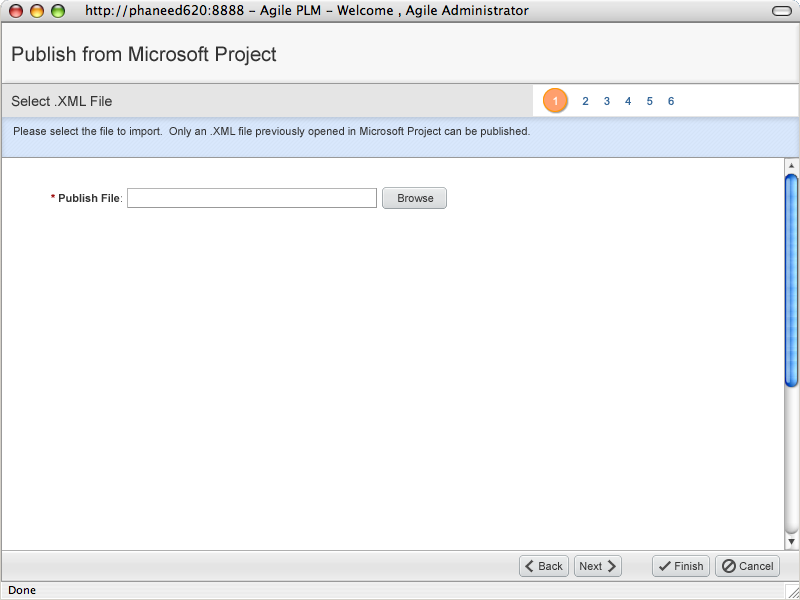
<style>
.page{position:relative;width:800px;height:600px;background:#ffffff}
.page>*{position:absolute;margin:0}
.t1{font:20px "ArialMT";color:#333333}
.t2{font:14px "ArialMT";color:#333333}
.t3{font:11px "ArialMT";color:#ffffff}
.t4{font:11px "ArialMT";color:#336699}
.t5{font:11px "ArialMT";color:#333333}
.t6{font:11px "Arial-BoldMT";color:#333333}
.t7{font:11px "Arial-BoldMT";color:#990000}
.t8{font:11px "ArialMT";color:#656565}
</style>
<div class="page">
<p class="t1" style="left:12px;top:46px;width:265px;height:20px">Publish from Microsoft Project</p>
<p class="t2" style="left:11px;top:95px;width:101px;height:12px">Select .XML File</p>
<p class="t3" style="left:553px;top:96px;width:4px;height:9px">1</p>
<p class="t4" style="left:582px;top:96px;width:92px;height:10px">2     3     4     5     6</p>
<p class="t5" style="left:14px;top:127px;width:516px;height:11px">Please select the file to import.  Only an .XML file previously opened in Microsoft Project can be published.</p>
<p class="t6" style="left:51px;top:194px;width:71px;height:8px"><span class="t7">*</span> Publish File<span class="t8">:</span></p>
<p class="t5" style="left:398px;top:194px;width:36px;height:8px">Browse</p>
<p class="t5" style="left:539px;top:562px;width:24px;height:8px">Back</p>
<p class="t5" style="left:580px;top:562px;width:22px;height:8px">Next</p>
<p class="t5" style="left:675px;top:562px;width:28px;height:8px">Finish</p>
<p class="t5" style="left:739px;top:562px;width:34px;height:8px">Cancel</p>
</div>
